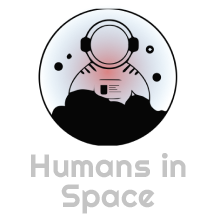
<style>
.page{position:relative;width:216px;height:216px;background:#ffffff}
.page>*{position:absolute;margin:0}
.t1{font:32px/30px "Righteous-Regular";letter-spacing:0.02em;color:#c4c4c4}
</style>
<div class="page">
<p class="t1" style="left:31px;top:153px;width:155px;height:61px;text-align:center">Humans in<br>Space</p>
</div>
